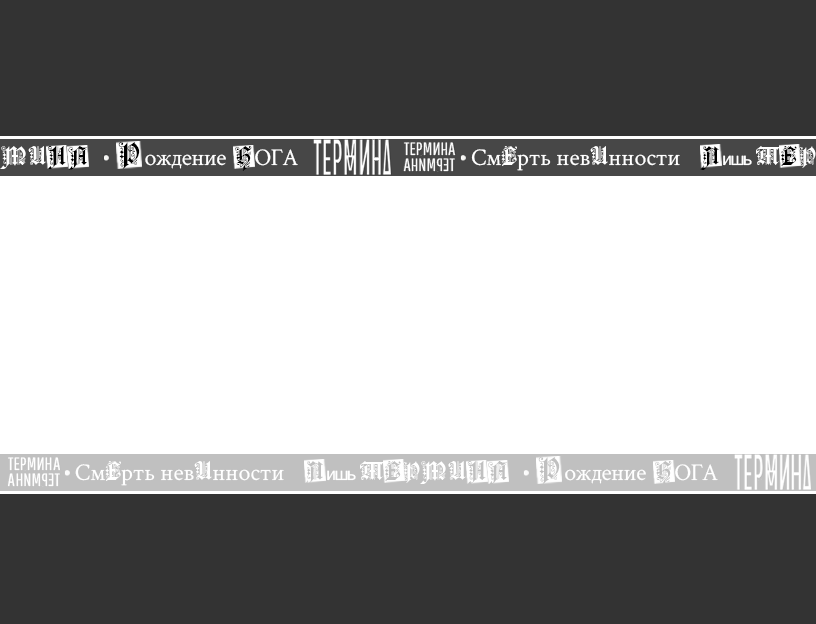
<style>
.page{position:relative;width:816px;height:624px;background:#ffffff}
.page>*{position:absolute;margin:0}
.t1{font:24px "CrimsonText-Regular";letter-spacing:-0.025em;color:#ffffff}
.t2{font:30px "FortunaGothicFlorishC";color:#000000}
.t3{font:24px "CrimsonText-Regular";color:#ffffff}
.t4{font:24px "FortunaGothicFlorishC";color:#ffffff}
.t5{font:30px "FortunaGothicFlorishC";color:#c0c0c0}
.t6{font:24px "FortunaGothicFlorishC";letter-spacing:-0.05em;color:#c0c0c0}
</style>
<div class="page">
<p class="t1" style="left:118px;top:142px;width:108px;height:27px"><span class="t2">Р </span>ождение</p>
<p class="t3" style="left:471px;top:146px;width:209px;height:25px">См<span class="t4">Е</span>рть нев<span class="t4">И</span>нности</p>
<p class="t3" style="left:75px;top:461px;width:209px;height:25px">См<span class="t4">Е</span>рть нев<span class="t4">И</span>нности</p>
<p class="t1" style="left:538px;top:457px;width:108px;height:27px"><span class="t5">Р </span>ождение</p>
<p class="t1" style="left:655px;top:461px;width:63px;height:25px"><span class="t6">Б </span>ОГА</p>
</div>
